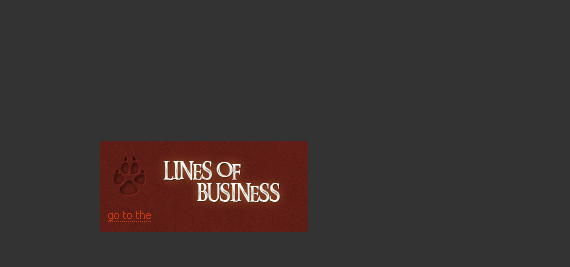
<style>
.page{position:relative;width:570px;height:267px;background:#333333}
.page>*{position:absolute;margin:0}
.t1{font:48px "AnimalTracks";color:#5e1d16}
.t2{font:18px "RingbearerMedium";color:#f6f4f1;text-transform:uppercase}
.t3{font:18px "RingbearerMedium";color:#f7f6f1;text-transform:uppercase}
.t4{font:11px "Tahoma";color:#c53b11}
</style>
<div class="page">
<p class="t1" style="left:114px;top:156px;width:31px;height:40px">i</p>
<p class="t2" style="left:163px;top:161px;width:78px;height:19px">Lines of</p>
<p class="t3" style="left:197px;top:183px;width:83px;height:19px">Business</p>
<p class="t4" style="left:108px;top:210px;width:43px;height:11px">go to the</p>
</div>
